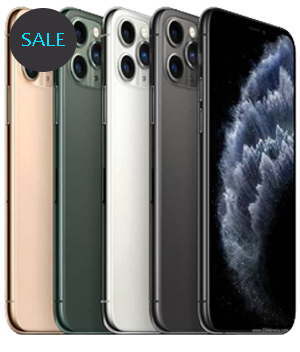
<style>
.page{position:relative;width:300px;height:352px}
.page>*{position:absolute;margin:0}
.t1{font:20.8px "Candara";color:#03e3ff}
</style>
<div class="page">
<p class="t1" style="left:22px;top:33px;width:43px;height:13px">SALE</p>
</div>
